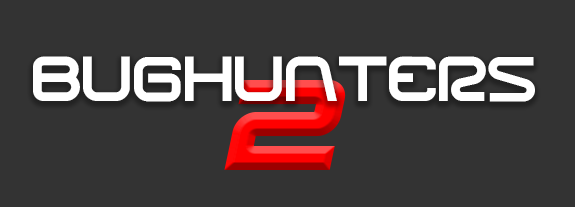
<style>
.page{position:relative;width:575px;height:207px;background:#333333}
.page>*{position:absolute;margin:0}
.t1{font:60px "Racer";color:#ffffff}
.t2{font:127.4px "Onky-Italic"}
</style>
<div class="page">
<p class="t1" style="left:33px;top:56px;width:502px;height:46px">bughunters</p>
<p class="t2" style="left:224px;top:80px;width:122px;height:90px">2</p>
</div>
